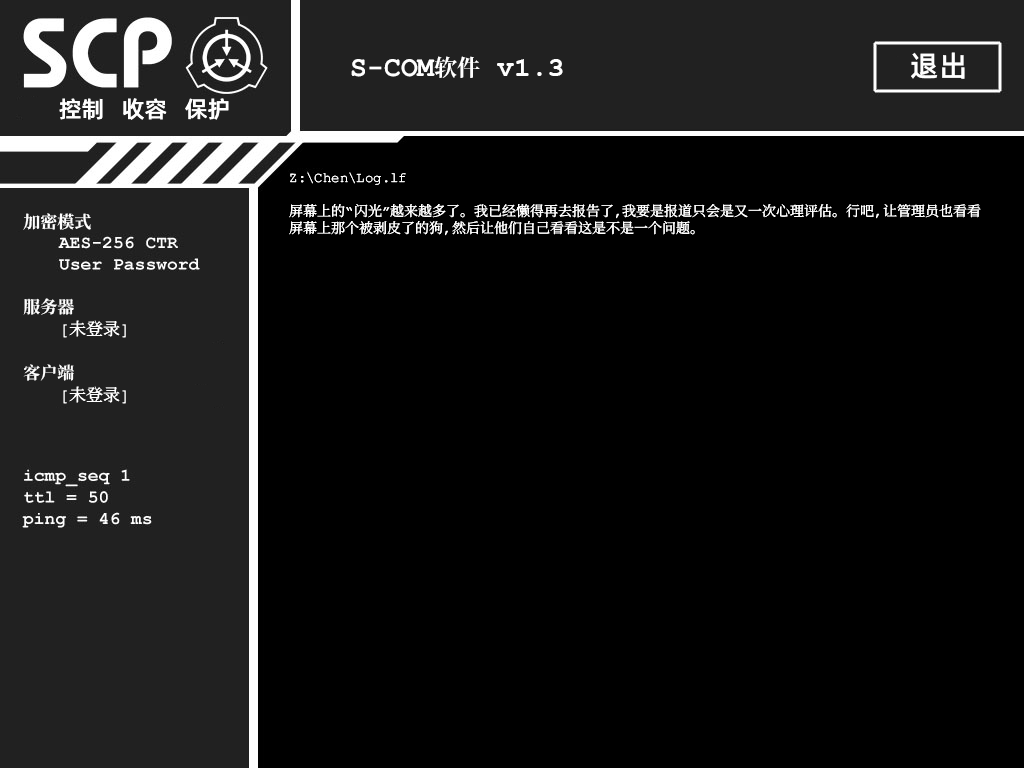
<style>
.page{position:relative;width:1024px;height:768px;background:#000000}
.page>*{position:absolute;margin:0}
.t1{font:29px "AlibabaPuHuiTiM";color:#ffffff}
.t2{font:28px "ContainmentBreach-Bold";color:#ffffff}
.t3{font:23px "ContainmentBreach-Bold";color:#ffffff}
.t4{font:28px "CourierNewPS-BoldMT";color:#ffffff}
.t5{font:23px "AlibabaPuHuiTiM";color:#ffffff}
.t6{font:14px/17px "ContainmentBreach-Regular";color:#ffffff}
.t7{font:17px/18px "ContainmentBreach-Regular";color:#ffffff}
.t8{font:17px/17px "ContainmentBreach-Bold";color:#ffffff}
.t9{font:17px/22px "ContainmentBreach-Bold";color:#ffffff}
.t10{font:17px/22px "ContainmentBreach-Regular";color:#ffffff}
</style>
<div class="page">
<p class="t1" style="left:911px;top:52px;width:54px;height:27px">退出</p>
<p class="t2" style="left:351px;top:56px;width:212px;height:22px">S-COM<span class="t3">软件 </span><span class="t4">v1.3</span></p>
<p class="t5" style="left:59px;top:98px;width:170px;height:22px">控制   收容   保护</p>
<p class="t6" style="left:289px;top:172px;width:692px;height:64px">Z:\Chen\Log.lf<br><br>屏幕上的“闪光”越来越多了。我已经懒得再去报告了，我要是报道只会是又一次心理评估。行吧，让管理员也看看<br>屏幕上那个被剥皮了的狗，然后让他们自己看看这是不是一个问题。</p>
<p class="t7" style="left:23px;top:213px;width:103px;height:191px"><span class="t8">加密模式<br><br><br><br><br></span><span class="t9">服务器<br> </span>[未登录]<br><br><span class="t9">客户端<br> </span><span class="t10">[未登录]</span></p>
</div>
